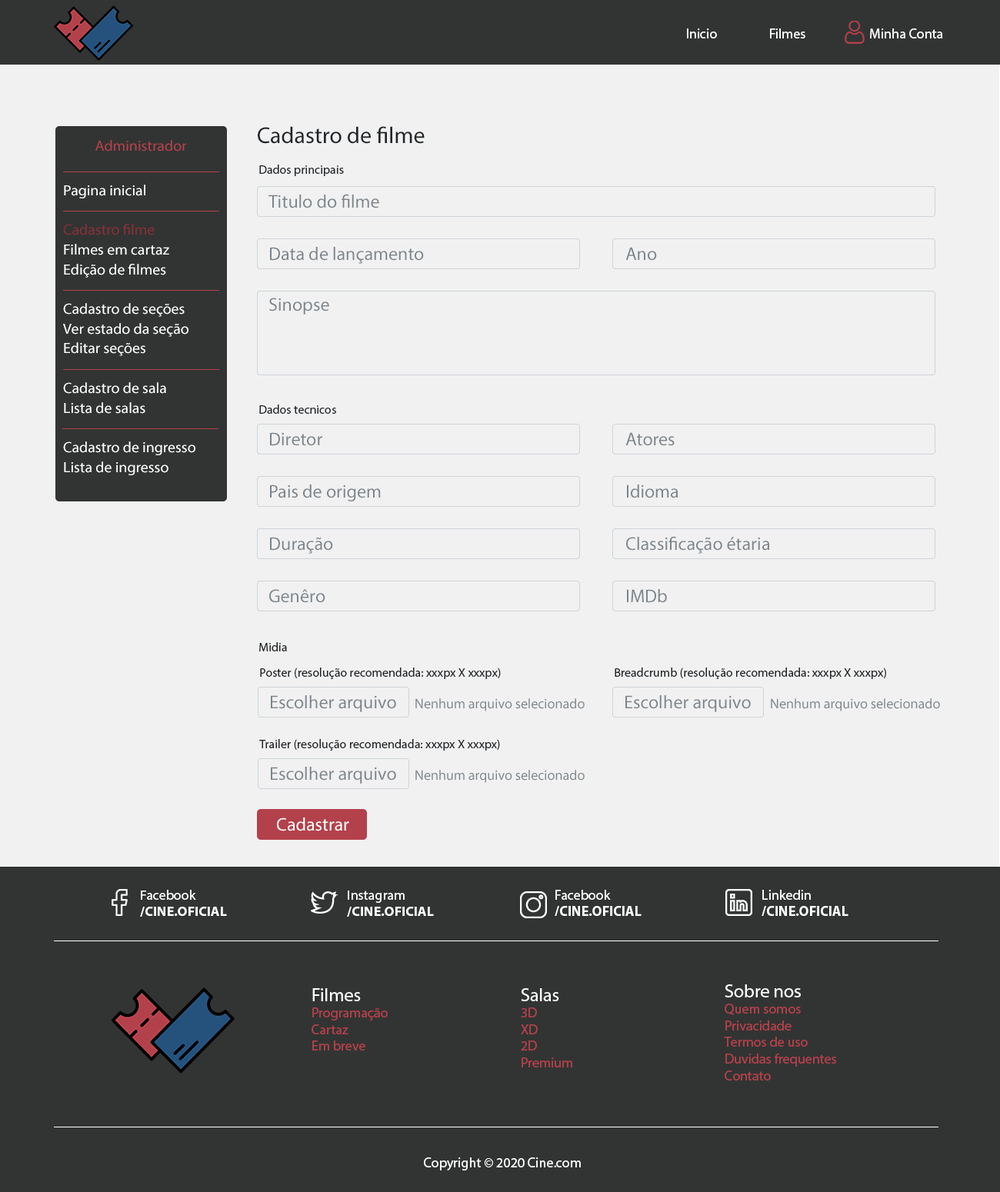
<style>
.page{position:relative;width:1000px;height:1192px;background:#f1f1f1}
.page>*{position:absolute;margin:0}
.t1{font:13.8px "MyriadPro-Regular";color:#ffffff}
.t2{font:23.1px "MyriadPro-Regular";color:#212529}
.t3{font:14.9px "MyriadPro-Regular";color:#b3414b}
.t4{font:12.3px "MyriadPro-Regular";color:#212529}
.t5{font:14.9px/19.8px "MyriadPro-Regular";color:#ffffff}
.t6{font:14.9px/19.8px "MyriadPro-Regular";color:#863037}
.t7{font:18.5px "MyriadPro-Regular";color:#7d858c}
.t8{font:13.8px "MyriadPro-Regular";color:#7d858c}
.t9{font:18.4px "MyriadPro-Regular";color:#ffffff}
.t10{font:13.7px "MyriadPro-Bold";color:#ffffff}
.t11{font:13.7px "MyriadPro-Regular";color:#ffffff}
.t12{font:13.8px "MyriadPro-Bold";color:#ffffff}
.t13{font:13.8px "MyriadPro-Regular";color:#b3414b}
.t14{font:18.5px "MyriadPro-Regular";color:#ffffff}
</style>
<div class="page">
<p class="t1" style="left:687px;top:28px;width:256px;height:10px">Inicio  Filmes        Minha Conta</p>
<p class="t2" style="left:258px;top:126px;width:167px;height:18px">Cadastro de filme</p>
<p class="t3" style="left:95px;top:140px;width:92px;height:12px">Administrador</p>
<p class="t4" style="left:259px;top:165px;width:85px;height:11px">Dados principais</p>
<p class="t5" style="left:63px;top:185px;width:132px;height:290px">Pagina inicial<br><br><span class="t6">Cadastro filme<br></span>Filmes em cartaz<br>Edição de filmes<br><br>Cadastro de seções<br>Ver estado da seção<br>Editar seções<br><br>Cadastro de sala<br>Lista de salas<br><br>Cadastro de ingresso<br>Lista de ingresso</p>
<p class="t7" style="left:268px;top:194px;width:111px;height:14px">Titulo do filme</p>
<p class="t7" style="left:270px;top:247px;width:154px;height:17px">Data de lançamento</p>
<p class="t7" style="left:625px;top:247px;width:32px;height:14px">Ano</p>
<p class="t7" style="left:269px;top:298px;width:60px;height:17px">Sinopse</p>
<p class="t4" style="left:259px;top:405px;width:77px;height:9px">Dados tecnicos</p>
<p class="t7" style="left:270px;top:432px;width:52px;height:14px">Diretor</p>
<p class="t7" style="left:625px;top:432px;width:50px;height:14px">Atores</p>
<p class="t7" style="left:270px;top:485px;width:111px;height:17px">Pais de origem</p>
<p class="t7" style="left:627px;top:485px;width:51px;height:13px">Idioma</p>
<p class="t7" style="left:270px;top:537px;width:63px;height:17px">Duração</p>
<p class="t7" style="left:626px;top:536px;width:144px;height:18px">Classificação étaria</p>
<p class="t7" style="left:269px;top:589px;width:56px;height:14px">Genêro</p>
<p class="t7" style="left:627px;top:589px;width:40px;height:14px">IMDb</p>
<p class="t4" style="left:259px;top:642px;width:28px;height:10px">Midia</p>
<p class="t4" style="left:260px;top:668px;width:241px;height:11px">Poster (resolução recomendada: xxxpx X xxxpx)</p>
<p class="t4" style="left:615px;top:668px;width:271px;height:11px">Breadcrumb (resolução recomendada: xxxpx X xxxpx)</p>
<p class="t7" style="left:271px;top:695px;width:125px;height:17px">Escolher arquivo</p>
<p class="t8" style="left:415px;top:698px;width:170px;height:14px">Nenhum arquivo selecionado</p>
<p class="t7" style="left:625px;top:695px;width:126px;height:17px">Escolher arquivo</p>
<p class="t8" style="left:771px;top:698px;width:169px;height:14px">Nenhum arquivo selecionado</p>
<p class="t4" style="left:259px;top:739px;width:241px;height:12px">Trailer (resolução recomendada: xxxpx X xxxpx)</p>
<p class="t7" style="left:271px;top:767px;width:125px;height:17px">Escolher arquivo</p>
<p class="t8" style="left:415px;top:770px;width:170px;height:13px">Nenhum arquivo selecionado</p>
<p class="t9" style="left:277px;top:818px;width:72px;height:14px">Cadastrar</p>
<p class="t10" style="left:140px;top:890px;width:87px;height:27px"><span class="t11">Facebook<br></span>/CINE.OFICIAL</p>
<p class="t10" style="left:347px;top:891px;width:87px;height:26px"><span class="t11">Instagram<br></span>/CINE.OFICIAL</p>
<p class="t12" style="left:555px;top:890px;width:87px;height:26px"><span class="t1">Facebook<br></span>/CINE.OFICIAL</p>
<p class="t12" style="left:762px;top:890px;width:87px;height:26px"><span class="t1">Linkedin<br></span>/CINE.OFICIAL</p>
<p class="t13" style="left:312px;top:989px;width:76px;height:62px"><span class="t14">Filmes<br></span>Programação<br>Cartaz<br>Em breve</p>
<p class="t13" style="left:521px;top:989px;width:51px;height:79px"><span class="t14">Salas<br></span>3D<br>XD<br>2D<br>Premium</p>
<p class="t13" style="left:724px;top:985px;width:112px;height:96px"><span class="t14">Sobre nos<br></span>Quem somos<br>Privacidade<br>Termos de uso<br>Duvidas frequentes<br>Contato</p>
<p class="t1" style="left:424px;top:1158px;width:157px;height:13px">Copyright © 2020 Cine.com</p>
</div>
